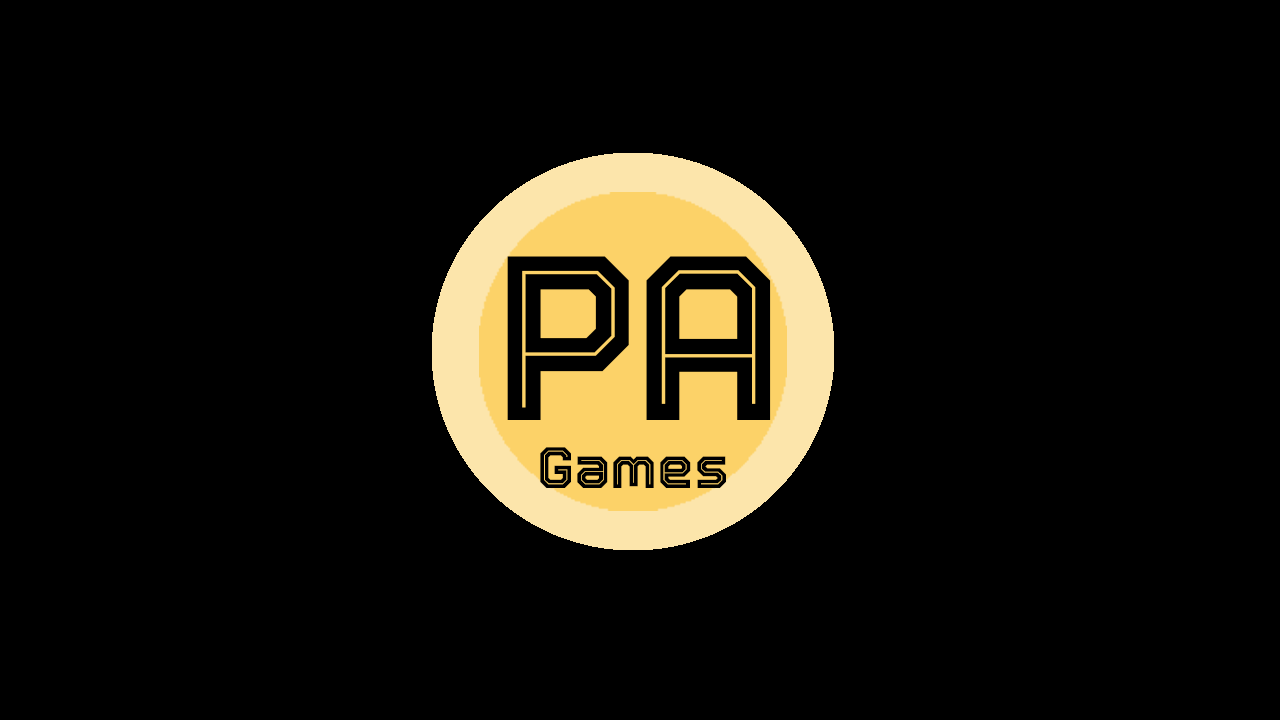
<style>
.page{position:relative;width:1280px;height:720px;background:#000000}
.page>*{position:absolute;margin:0}
.t1{font:233.7px "Tourney-Bold";color:#000000}
.t2{font:58.3px "Tourney-Bold";color:#000000}
</style>
<div class="page">
<p class="t1" style="left:507px;top:256px;width:122px;height:164px">P</p>
<p class="t1" style="left:646px;top:256px;width:125px;height:164px">A</p>
<p class="t2" style="left:540px;top:447px;width:186px;height:41px">Games</p>
</div>
